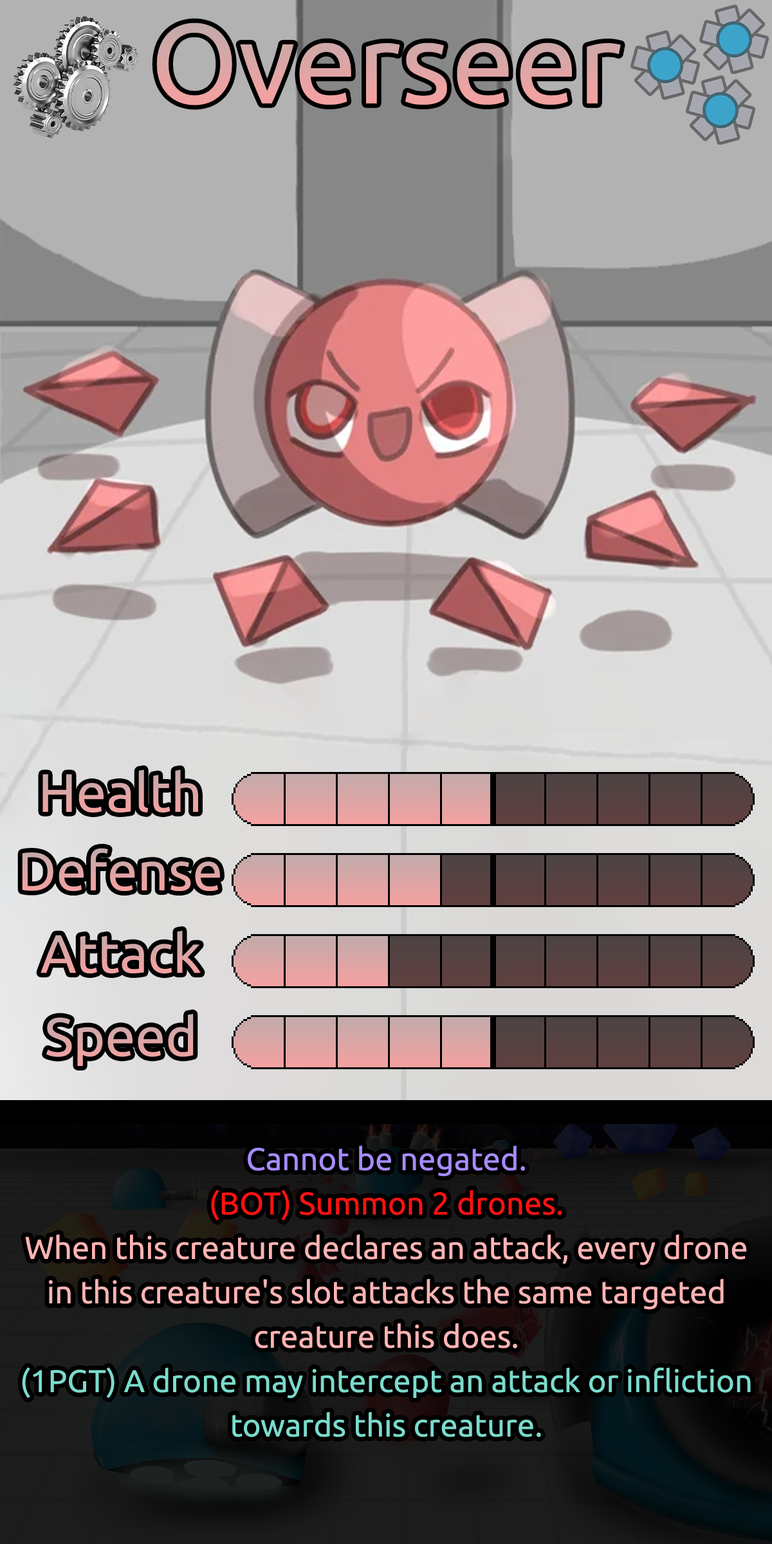
<style>
.page{position:relative;width:772px;height:1544px}
.page>*{position:absolute;margin:0}
.t1{font:194.3px "Ubuntu-Regular";color:#e0a5a5}
.t2{font:92.7px "Ubuntu-Regular";color:#e0a5a5}
.t3{font:92.7px "Ubuntu-Regular";color:#e2a4a4}
.t4{font:92.7px "Ubuntu-Regular";color:#dca5a5}
.t5{font:54.1px/44.4px "Ubuntu-Regular";color:#ffb3b3}
.t6{font:54.1px/44.4px "Ubuntu-Regular";color:#a68bff}
.t7{font:54.1px/44.4px "Ubuntu-Regular";color:#ff1111}
.t8{font:54.1px/44.4px "Ubuntu-Regular";color:#7adbcc}
</style>
<div class="page">
<p class="t1" style="left:156px;top:23px;width:465px;height:83px">Overseer</p>
<p class="t2" style="left:42px;top:770px;width:156px;height:43px">Health</p>
<p class="t3" style="left:22px;top:848px;width:198px;height:43px">Defense</p>
<p class="t3" style="left:41px;top:930px;width:160px;height:44px">Attack</p>
<p class="t4" style="left:46px;top:1014px;width:148px;height:52px">Speed</p>
<p class="t5" style="left:22px;top:1145px;width:729px;height:292px;text-align:center"><span class="t6">Cannot be negated.<br></span><span class="t7">(BOT) Summon 2 drones.<br></span>When this creature declares an attack, every drone in this creature's slot attacks the same targeted creature this does.<br><span class="t8">(1PGT) A drone may intercept an attack or infliction towards this creature.</span></p>
</div>
